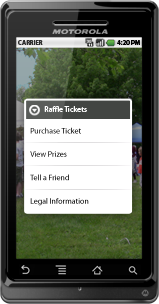
<style>
.page{position:relative;width:159px;height:304px}
.page>*{position:absolute;margin:0}
.t1{font:6.3px "MyriadPro-Bold";color:#2e2e2e}
.t2{font:6.3px "MyriadPro-Bold";color:#000000}
.t3{font:7.9px "MyriadPro-Regular";color:#ffffff}
.t4{font:7.9px "MyriadPro-Regular"}
</style>
<div class="page">
<p class="t1" style="left:18px;top:40px;width:25px;height:5px">CARRIER</p>
<p class="t2" style="left:117px;top:40px;width:23px;height:5px">4:20 PM</p>
<p class="t3" style="left:44px;top:106px;width:43px;height:6px">Raffle Tickets</p>
<p class="t4" style="left:30px;top:127px;width:51px;height:7px">Purchase Ticket</p>
<p class="t4" style="left:30px;top:151px;width:37px;height:6px">View Prizes</p>
<p class="t4" style="left:30px;top:174px;width:39px;height:7px">Tell a Friend</p>
<p class="t4" style="left:30px;top:198px;width:59px;height:8px">Legal Information</p>
</div>
